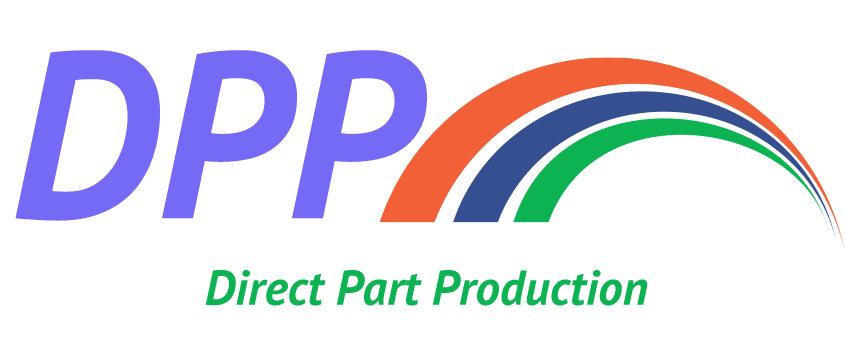
<style>
.page{position:relative;width:854px;height:354px;background:#ffffff}
.page>*{position:absolute;margin:0}
.t1{font:236.3px "PTSans-BoldItalic";color:#756af5}
.t2{font:49px "PTSans-BoldItalic";color:#0db353}
</style>
<div class="page">
<p class="t1" style="left:15px;top:50px;width:412px;height:171px">DPP</p>
<p class="t2" style="left:205px;top:270px;width:443px;height:36px">Direct Part Production</p>
</div>
